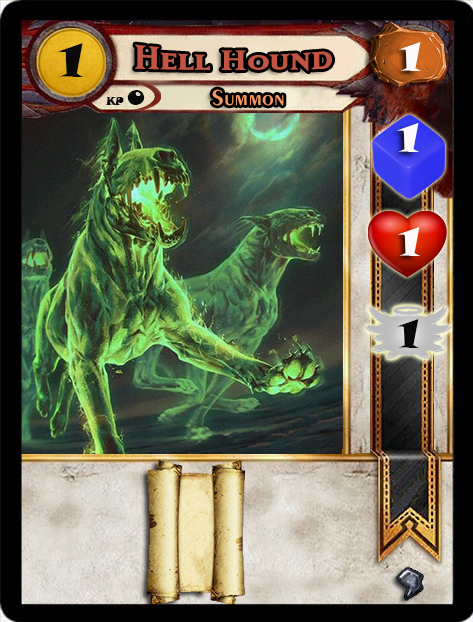
<style>
.page{position:relative;width:473px;height:622px}
.page>*{position:absolute;margin:0}
.t1{font:46.6px "SnapITC-Regular";color:#090909;scale:1.05 1}
.t2{font:40px "MatrixBoldSmallCaps";color:#c25443;scale:1.06 1}
.t3{font:40px "SnapITC-Regular";color:#fef9f9;scale:1.05 1}
.t4{font:22.7px "Exotic350BT-DemiBold";color:#f89c64;scale:1.06 1}
.t5{font:20.5px "SnapITC-Regular";color:#090909}
.t6{font:40px "SnapITC-Regular";color:#090909;scale:1.05 1}
</style>
<div class="page">
<p class="t1" style="left:58px;top:43px;width:25px;height:34px">1</p>
<p class="t2" style="left:135px;top:44px;width:197px;height:28px">Hell Hound</p>
<p class="t3" style="left:399px;top:42px;width:22px;height:29px">1</p>
<p class="t4" style="left:212px;top:89px;width:72px;height:17px">Summon</p>
<p class="t5" style="left:127px;top:90px;width:18px;height:15px">0</p>
<p class="t3" style="left:397px;top:123px;width:22px;height:29px">1</p>
<p class="t3" style="left:398px;top:227px;width:22px;height:29px">1</p>
<p class="t6" style="left:397px;top:319px;width:22px;height:29px">1</p>
</div>
